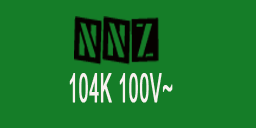
<style>
.page{position:relative;width:256px;height:128px;background:#157d28}
.page>*{position:absolute;margin:0}
.t1{font:51.5px "Tinsnips";letter-spacing:0.02em;color:#060100;font-weight:bold;scale:0.4 1}
.t2{font:40.3px "ArialNarrow";letter-spacing:0.02em;color:#f9f2f0;font-weight:bold;scale:0.52 1}
</style>
<div class="page">
<p class="t1" style="left:74px;top:16px;width:85px;height:49px">NNZ</p>
<p class="t2" style="left:69px;top:73px;width:104px;height:30px">104K 100V~</p>
</div>
